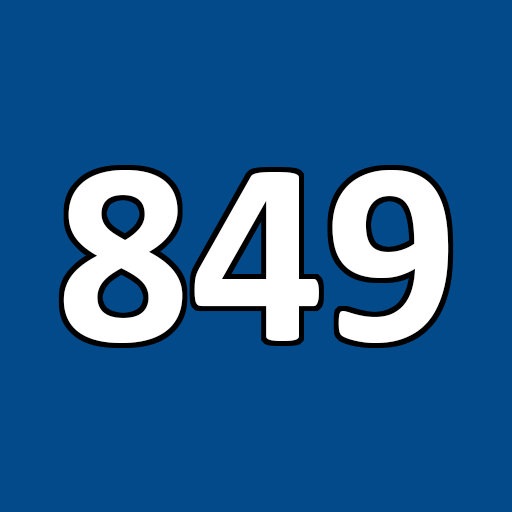
<style>
.page{position:relative;width:512px;height:512px;background:#024a8a}
.page>*{position:absolute;margin:0}
.t1{font:264.6px "Calibri-Bold";color:#ffffff}
</style>
<div class="page">
<p class="t1" style="left:63px;top:170px;width:386px;height:173px">849</p>
</div>
